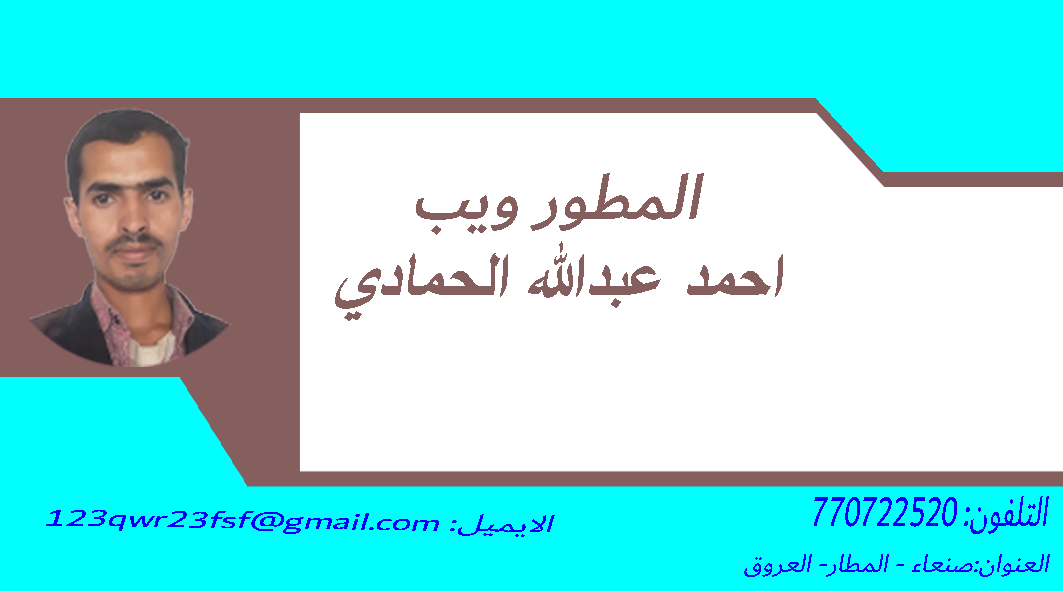
<style>
.page{position:relative;width:1063px;height:591px;background:#ffffff}
.page>*{position:absolute;margin:0}
.t1{font:66.7px "SimplifiedArabic-Bold";color:#855e5e;font-style:italic}
.t2{font:66.7px "Dubai-Medium";color:#855e5e;font-style:italic}
.t3{font:44.1px "Dubai-Regular";color:#0000ff;font-style:italic;scale:0.68 1}
.t4{font:25.1px "Dubai-Regular";color:#0000ff;font-style:italic;scale:1.54 1}
.t5{font:26.9px "Dubai-Regular";color:#0000ff;font-style:italic}
</style>
<div class="page">
<p class="t1" style="left:335px;top:173px;width:448px;height:148px;text-align:center"><span class="t2">المطور ويب<br></span>احمد عبدالله الحمادي</p>
<p class="t3" style="left:814px;top:496px;width:235px;height:38px">770722520 :التلفون</p>
<p class="t4" style="left:46px;top:510px;width:509px;height:27px;rotate:1deg">123qwr23fsf@gmail.com :الايميل</p>
<p class="t5" style="left:744px;top:554px;width:306px;height:23px">العنوان:صنعاء - المطار- العروق</p>
</div>
